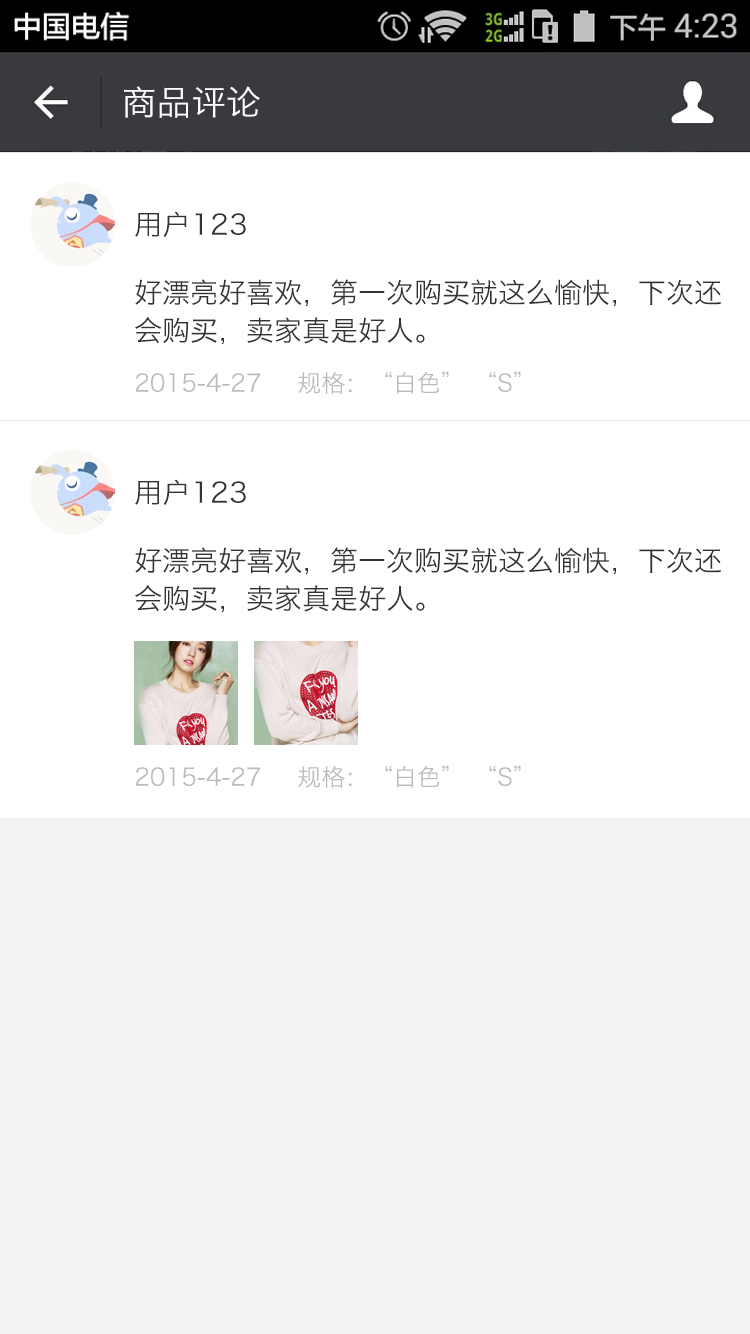
<style>
.page{position:relative;width:750px;height:1334px;background:#ffffff}
.page>*{position:absolute;margin:0}
.t1{font:34px "HiraginoSansGB-W3";letter-spacing:0.022em;color:#ffffff}
.t2{font:28px "HiraginoSansGB-W3";letter-spacing:0.022em;color:#333333}
.t3{font:28px/36px "HiraginoSansGB-W3";color:#333333}
.t4{font:24px "HiraginoSansGB-W3";color:#bbbbbb}
</style>
<div class="page">
<p class="t1" style="left:124px;top:86px;width:136px;height:32px">商品评论</p>
<p class="t2" style="left:135px;top:211px;width:111px;height:27px">用户123</p>
<p class="t3" style="left:135px;top:279px;width:587px;height:66px">好漂亮好喜欢，第一次购买就这么愉快，下次还<br>会购买，卖家真是好人。</p>
<p class="t4" style="left:135px;top:373px;width:126px;height:19px">2015-4-27</p>
<p class="t4" style="left:298px;top:371px;width:223px;height:23px">规格：“白色” “S”</p>
<p class="t2" style="left:135px;top:479px;width:111px;height:27px">用户123</p>
<p class="t3" style="left:135px;top:547px;width:587px;height:66px">好漂亮好喜欢，第一次购买就这么愉快，下次还<br>会购买，卖家真是好人。</p>
<p class="t4" style="left:135px;top:767px;width:126px;height:19px">2015-4-27</p>
<p class="t4" style="left:298px;top:765px;width:223px;height:23px">规格：“白色” “S”</p>
</div>
